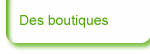
<style>
.page{position:relative;width:150px;height:54px;background:#fefefe}
.page>*{position:absolute;margin:0}
.t1{font:14px "ArialMT";color:#53a807}
</style>
<div class="page">
<p class="t1" style="left:20px;top:15px;width:88px;height:13px">Des boutiques</p>
</div>
